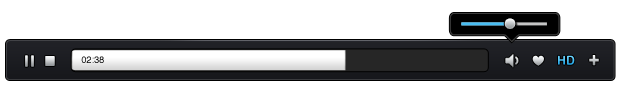
<style>
.page{position:relative;width:620px;height:90px;background:#ffffff}
.page>*{position:absolute;margin:0}
.t1{font:9.5px "Helvetica";color:#000000;scale:0.95 1}
</style>
<div class="page">
<p class="t1" style="left:81px;top:56px;width:23px;height:7px">02:38</p>
</div>
